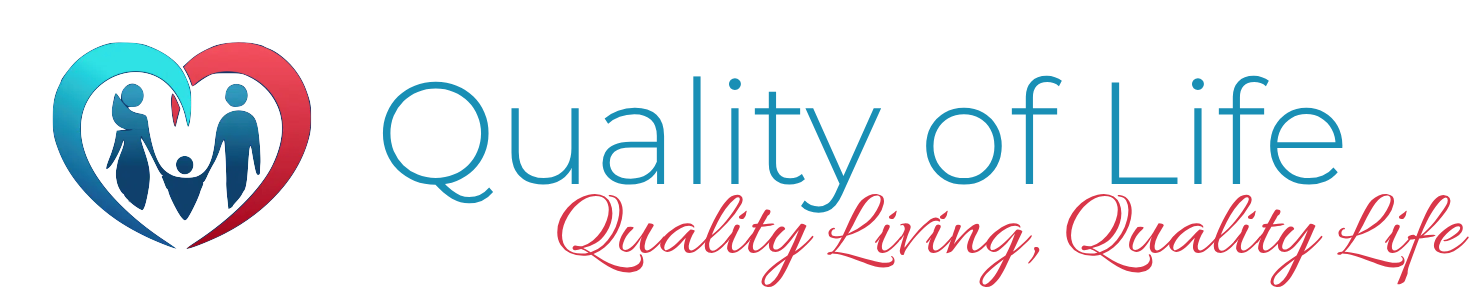
<style>
.page{position:relative;width:1469px;height:305px;background:#ffffff}
.page>*{position:absolute;margin:0}
.t1{font:145px "Montserrat-Light";color:#198fb5}
.t2{font:95px "Allura-Regular";color:#d93649}
</style>
<div class="page">
<p class="t1" style="left:382px;top:75px;width:961px;height:138px">Quality of Life</p>
<p class="t2" style="left:557px;top:193px;width:912px;height:95px">Quality Living, Quality Life</p>
</div>
